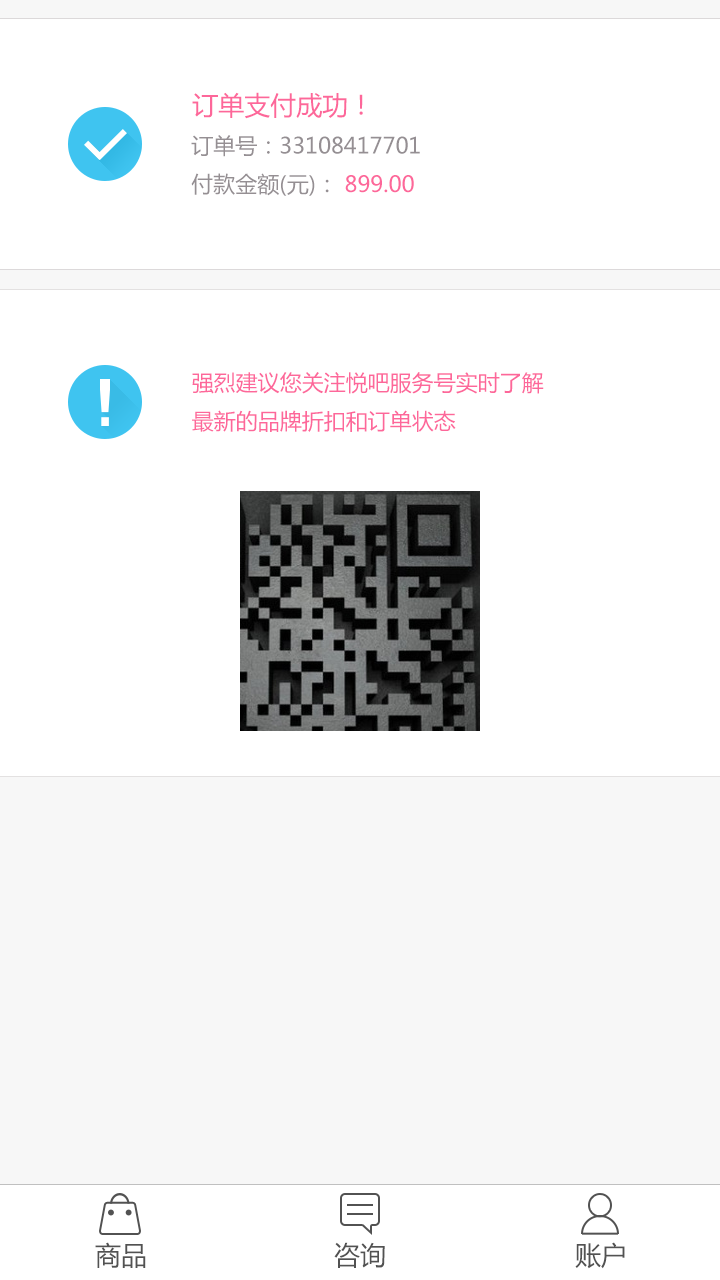
<style>
.page{position:relative;width:720px;height:1280px;background:#ffffff}
.page>*{position:absolute;margin:0}
.t1{font:26px "MicrosoftYaHei";color:#fd679a}
.t2{font:22px "MicrosoftYaHei";color:#958f93}
.t3{font:22px "MicrosoftYaHei";color:#fd679a}
.t4{font:26px "MicrosoftYaHei";color:#525252}
</style>
<div class="page">
<p class="t1" style="left:192px;top:92px;width:171px;height:27px">订单支付成功！</p>
<p class="t2" style="left:191px;top:135px;width:229px;height:61px">订单号：33108417701<br>付款金额(元)：<span class="t3"> 899.00</span></p>
<p class="t3" style="left:192px;top:372px;width:352px;height:60px">强烈建议您关注悦吧服务号实时了解<br>最新的品牌折扣和订单状态</p>
<p class="t4" style="left:95px;top:1242px;width:51px;height:26px">商品</p>
<p class="t4" style="left:334px;top:1242px;width:51px;height:26px">咨询</p>
<p class="t4" style="left:575px;top:1242px;width:50px;height:27px">账户</p>
</div>
